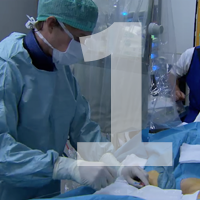
<style>
.page{position:relative;width:200px;height:200px}
.page>*{position:absolute;margin:0}
.t1{font:208.3px "PostGrotesk-Bold";color:#9ea7af}
</style>
<div class="page">
<p class="t1" style="left:77px;top:22px;width:96px;height:144px">1</p>
</div>
